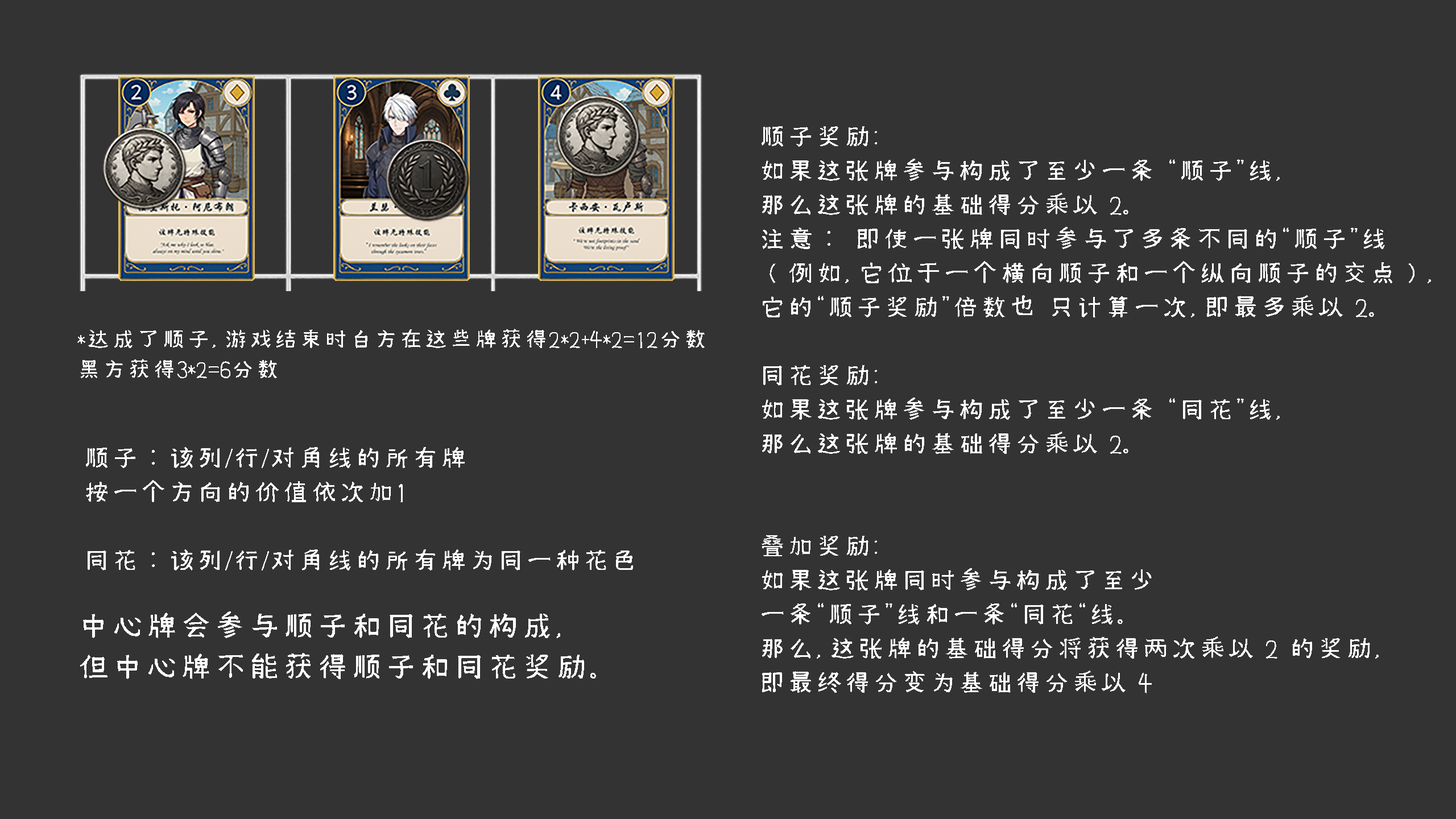
<style>
.page{position:relative;width:1456px;height:819px;background:#333333}
.page>*{position:absolute;margin:0}
.t1{font:28.4px "Xim-Sans-Brahmic";color:#ffffff}
.t2{font:25px "Xim-Sans-Brahmic";color:#ffffff}
.t3{font:34.1px "Xim-Sans-Brahmic";color:#ffffff}
</style>
<div class="page">
<p class="t1" style="left:762px;top:126px;width:669px;height:567px">顺子奖励: <br>如果这张牌参与构成了至少一条 “顺子”线，<br>那么这张牌的基础得分乘以 2。<br>注意： 即使一张牌同时参与了多条不同的“顺子”线<br>（例如，它位于一个横向顺子和一个纵向顺子的交点），<br>它的“顺子奖励”倍数也 只计算一次，即最多乘以 2。<br><br>同花奖励: <br>如果这张牌参与构成了至少一条 “同花”线，<br>那么这张牌的基础得分乘以 2。<br><br><br>叠加奖励: <br>如果这张牌同时参与构成了至少<br>一条“顺子”线和一条“同花“线。<br>那么，这张牌的基础得分将获得两次乘以 2 的奖励，<br>即最终得分变为基础得分乘以 4</p>
<p class="t2" style="left:77px;top:329px;width:628px;height:49px">*达成了顺子，游戏结束时白方在这些牌获得2*2+4*2=12分数<br>黑方获得3*2=6分数</p>
<p class="t1" style="left:86px;top:447px;width:547px;height:123px">顺子：该列/行/对角线的所有牌<br>按一个方向的价值依次加1<br><br>同花：该列/行/对角线的所有牌为同一种花色</p>
<p class="t3" style="left:80px;top:611px;width:516px;height:68px">中心牌会参与顺子和同花的构成，<br>但中心牌不能获得顺子和同花奖励。</p>
</div>
